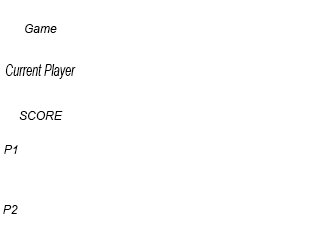
<style>
.page{position:relative;width:320px;height:240px;background:#ffffff}
.page>*{position:absolute;margin:0}
.t1{font:12px "Arial-ItalicMT";color:#000000}
.t2{font:16.8px "Arial-ItalicMT";color:#000000;scale:0.64 1}
</style>
<div class="page">
<p class="t1" style="left:25px;top:24px;width:32px;height:9px">Game</p>
<p class="t2" style="left:5px;top:64px;width:71px;height:15px">Current Player</p>
<p class="t1" style="left:19px;top:111px;width:44px;height:9px">SCORE</p>
<p class="t1" style="left:4px;top:145px;width:14px;height:9px">P1</p>
<p class="t1" style="left:3px;top:205px;width:15px;height:9px">P2</p>
</div>
